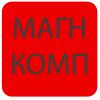
<style>
.page{position:relative;width:100px;height:100px;background:#ec0000}
.page>*{position:absolute;margin:0}
.t1{font:30px "MyriadPro-Regular";color:#3c3c3c}
</style>
<div class="page">
<p class="t1" style="left:12px;top:17px;width:76px;height:58px;text-align:center">МАГН КОМП</p>
</div>
